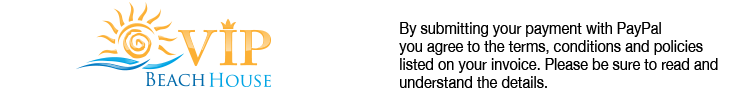
<style>
.page{position:relative;width:731px;height:90px;background:#ffffff}
.page>*{position:absolute;margin:0}
.t1{font:16.5px/18px "HelveticaNeue";color:#000000;scale:0.88 1}
</style>
<div class="page">
<p class="t1" style="left:399px;top:22px;width:319px;height:66px">By submitting your payment with PayPal<br>you agree to the terms, conditions and policies<br>listed on your invoice. Please be sure to read and <br>understand the details.</p>
</div>
